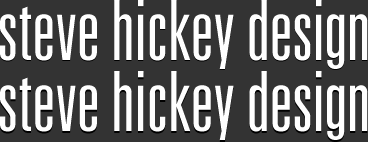
<style>
.page{position:relative;width:368px;height:142px;background:#333333}
.page>*{position:absolute;margin:0}
.t1{font:83px "Univers-LightUltraCondensed";color:#ffffff}
</style>
<div class="page">
<p class="t1" style="left:0px;top:0px;width:368px;height:69px">steve hickey design</p>
<p class="t1" style="left:0px;top:71px;width:368px;height:69px">steve hickey design</p>
</div>
